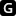
<style>
.page{position:relative;width:16px;height:16px;background:#000000}
.page>*{position:absolute;margin:0}
.t1{font:14px "MyriadHebrew-Regular";color:#eeeeee}
</style>
<div class="page">
<p class="t1" style="left:3px;top:3px;width:10px;height:10px">G</p>
</div>
